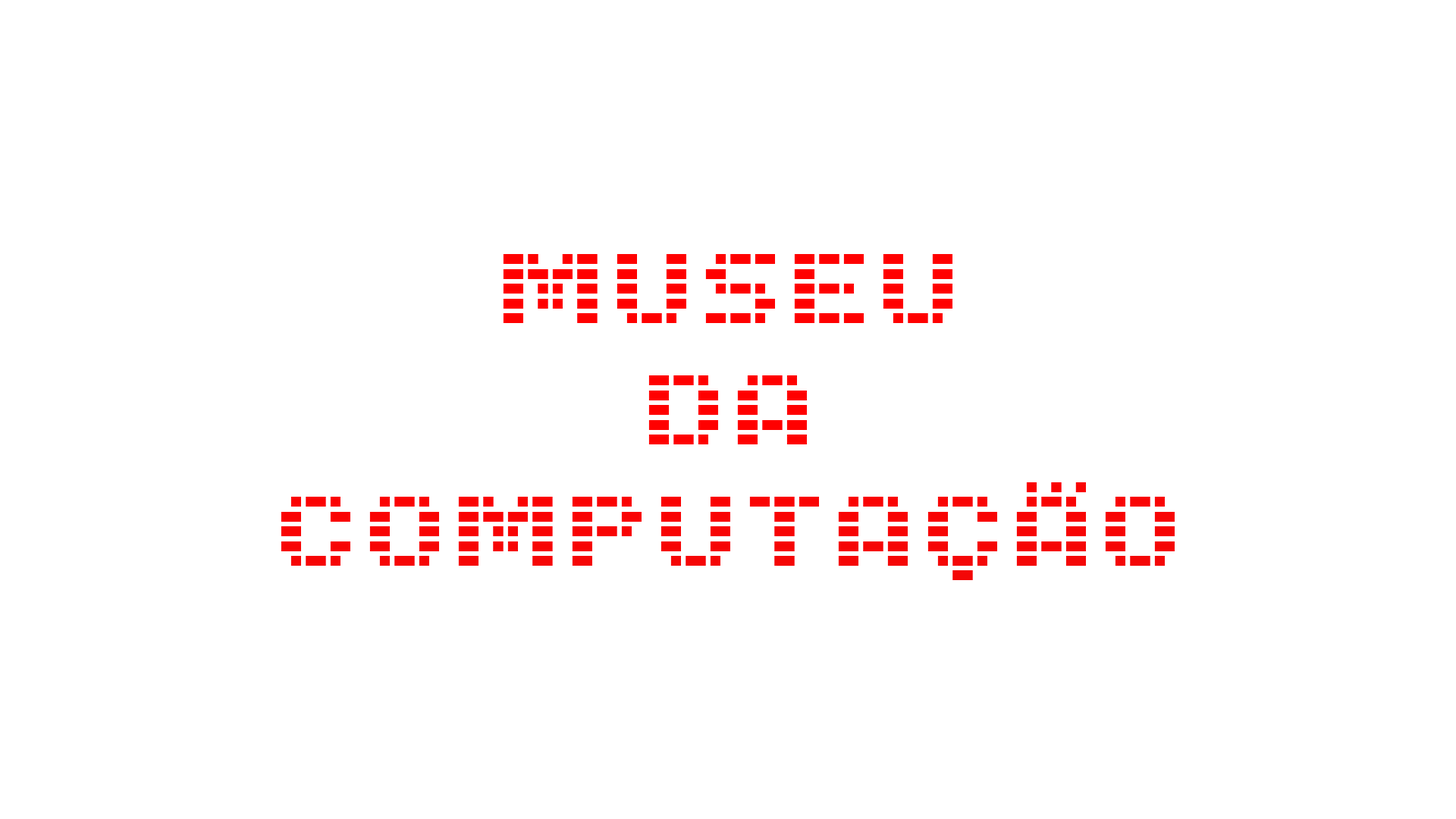
<style>
.page{position:relative;width:1456px;height:819px;background:#ffffff}
.page>*{position:absolute;margin:0}
.t1{font:101.1px "Trigram-Light";color:#fa0303}
</style>
<div class="page">
<p class="t1" style="left:281px;top:254px;width:894px;height:326px;text-align:center">MUSEU<br>DA<br>COMPUTAÇÃO</p>
</div>
